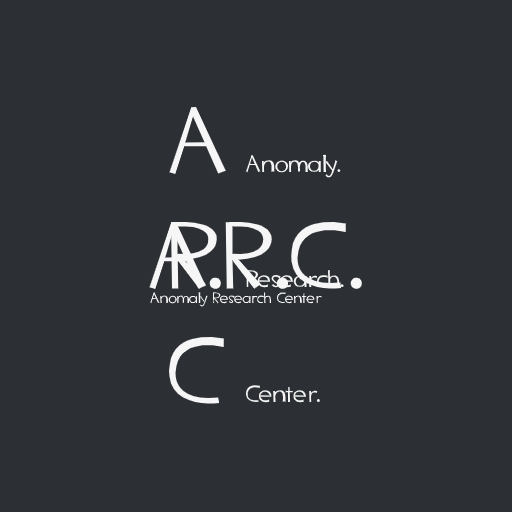
<style>
.page{position:relative;width:512px;height:512px;background:#2c2f33}
.page>*{position:absolute;margin:0}
.t1{font:96px "TF2Secondary";color:#f6f6f6}
.t2{font:24px "TF2Secondary";color:#f6f6f6}
.t3{font:15px "TF2Secondary";color:#f6f6f6}
</style>
<div class="page">
<p class="t1" style="left:168px;top:107px;width:58px;height:297px">A<br>R<br>C</p>
<p class="t2" style="left:245px;top:154px;width:99px;height:249px">Anomaly. <br><br><br><br>Research. <br><br><br><br>Center.</p>
<p class="t1" style="left:149px;top:221px;width:214px;height:69px">A.R.C.</p>
<p class="t3" style="left:150px;top:292px;width:172px;height:15px">Anomaly Research Center</p>
</div>
